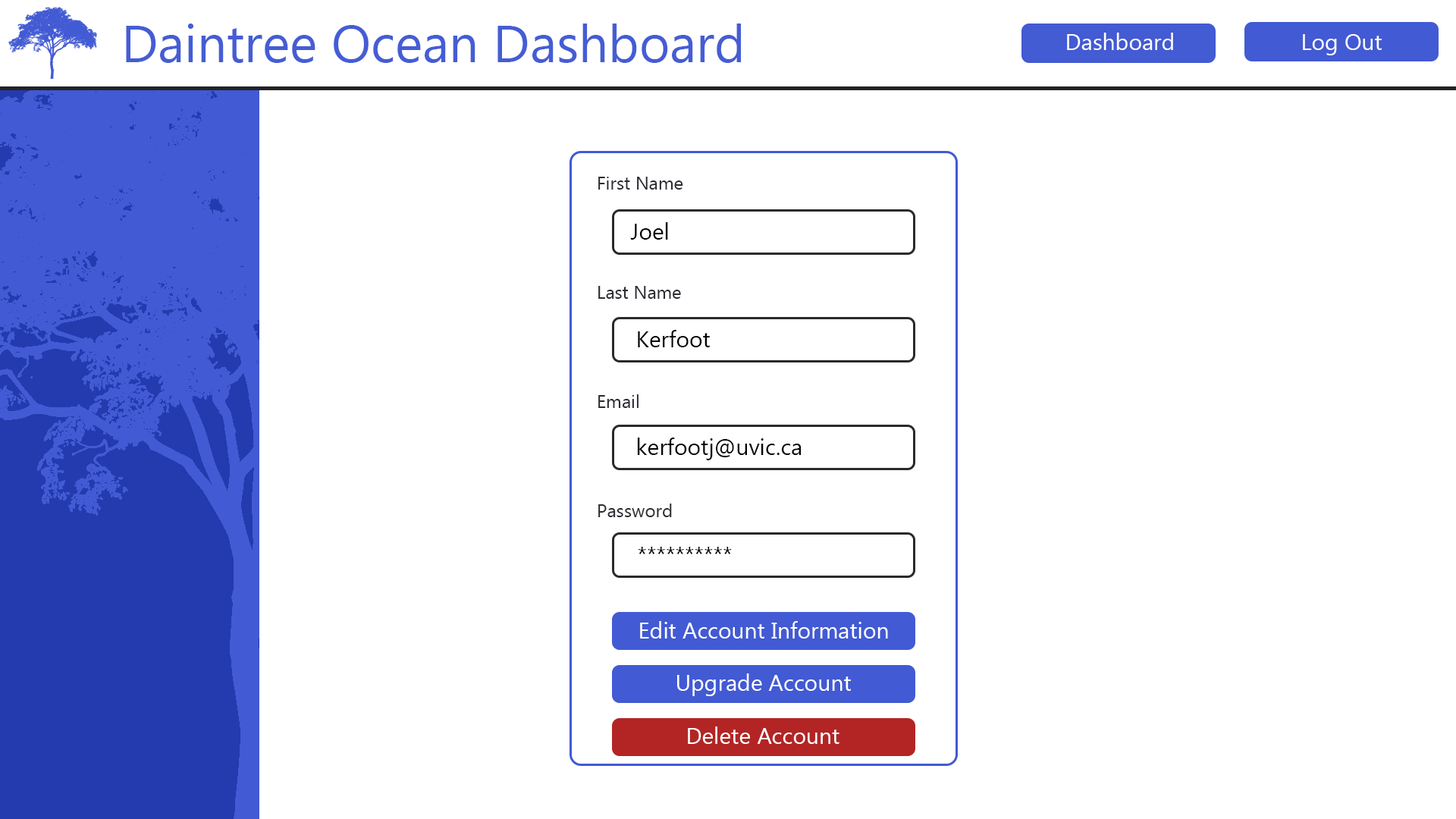
<style>
.page{position:relative;width:1456px;height:819px;background:#ffffff}
.page>*{position:absolute;margin:0}
.t1{font:52.3px "MyanmarText";color:#455dd4}
.t2{font:22.7px "MyanmarText";color:#ffffff}
.t3{font:18.2px "MyanmarText";color:#2c2d33}
.t4{font:22.7px "MyanmarText";color:#2c2d33}
.t5{font:22.7px "MyanmarText";color:#000000}
.t6{font:4.5px "MyanmarText";color:#656568}
.t7{font:22.7px "MyanmarText";color:#010101}
.t8{font:4.5px "MyanmarText";color:#010101}
.t9{font:4.5px "MyanmarText";color:#000000}
</style>
<div class="page">
<p class="t1" style="left:126px;top:24px;width:615px;height:39px">Daintree Ocean Dashboard</p>
<p class="t2" style="left:1067px;top:33px;width:106px;height:17px">Dashboard</p>
<p class="t2" style="left:1303px;top:34px;width:79px;height:21px">Log Out</p>
<p class="t3" style="left:598px;top:177px;width:85px;height:340px"><span class="t4"> <br></span> First Name<br><br><br> <br><br> Last Name<br><br><br><br><br> Email<br><br><br><br><br> Password</p>
<p class="t5" style="left:630px;top:222px;width:38px;height:18px"><span class="t6"><br>   </span>Joel</p>
<p class="t5" style="left:638px;top:330px;width:72px;height:17px"><span class="t6"><br>   </span>Kerfoot</p>
<p class="t7" style="left:637px;top:438px;width:165px;height:22px"><span class="t8"><br></span>   kerfootj@uvic.ca</p>
<p class="t5" style="left:638px;top:547px;width:94px;height:7px"><span class="t9"><br></span>   **********</p>
<p class="t2" style="left:640px;top:621px;width:248px;height:18px">Edit Account Information</p>
<p class="t2" style="left:677px;top:673px;width:174px;height:23px">Upgrade Account</p>
<p class="t2" style="left:688px;top:726px;width:151px;height:18px">Delete Account</p>
</div>
